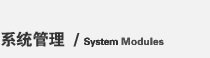
<style>
.page{position:relative;width:210px;height:58px;background:#f2f2f2}
.page>*{position:absolute;margin:0}
.t1{font:16.5px "FZDHTJW--GB1-0";letter-spacing:-0.025em;color:#353535}
.t2{font:10px "FZDHTJW--GB1-0";letter-spacing:-0.025em;color:#353535}
.t3{font:10px "FZDHTJW--GB1-0";letter-spacing:0.025em;color:#504f4f}
</style>
<div class="page">
<p class="t1" style="left:1px;top:31px;width:163px;height:16px">系统管理  / <span class="t2">System</span><span class="t3"> Modules</span></p>
</div>
